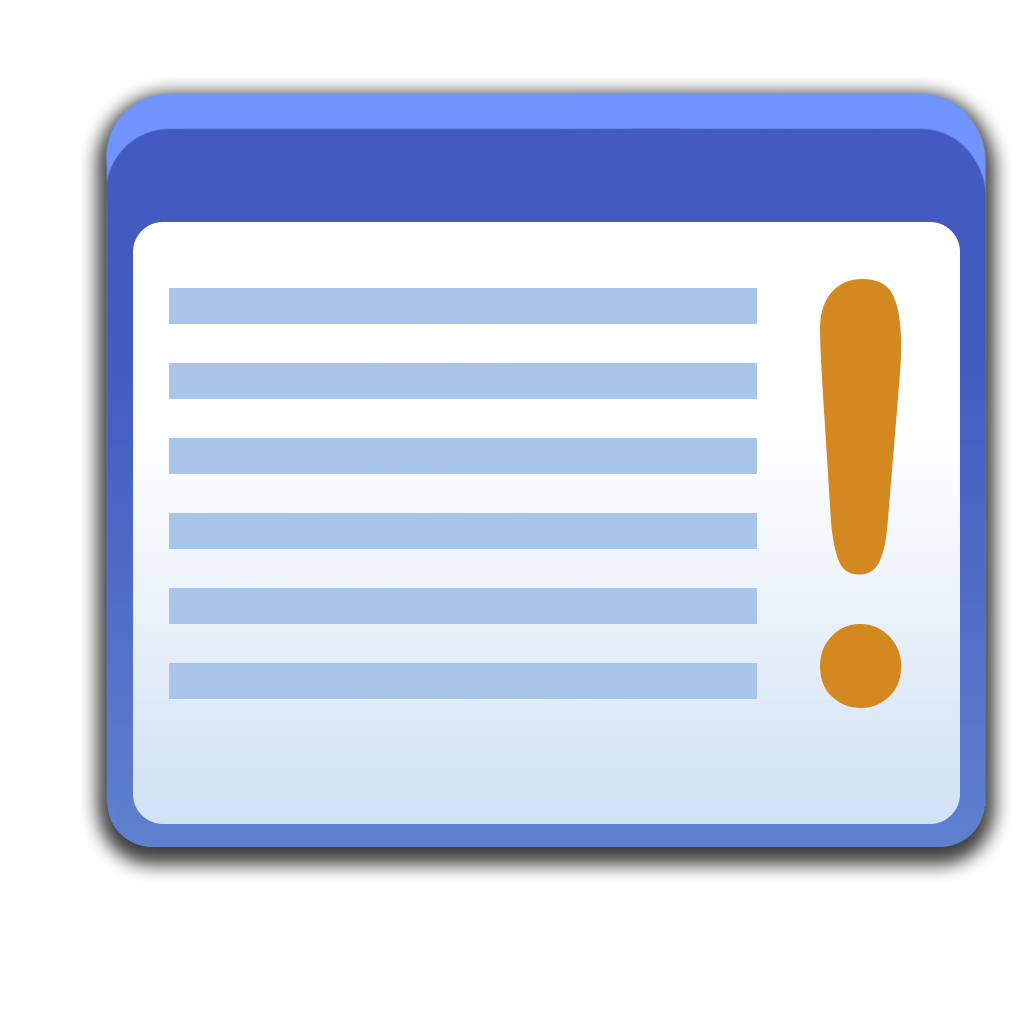
<style>
.page{position:relative;width:1024px;height:1024px;background:#ffffff}
.page>*{position:absolute;margin:0}
.t1{font:578.6px "ArialRoundedMTBold";letter-spacing:-0.015em;color:#d48920;scale:0.95 1}
</style>
<div class="page">
<p class="t1" style="left:820px;top:279px;width:82px;height:429px">!</p>
</div>
